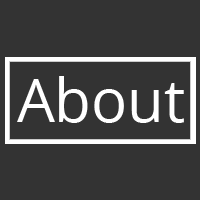
<style>
.page{position:relative;width:200px;height:200px;background:#333333}
.page>*{position:absolute;margin:0}
.t1{font:60px "OpenSans";color:#ffffff}
</style>
<div class="page">
<p class="t1" style="left:17px;top:76px;width:167px;height:47px">About</p>
</div>
